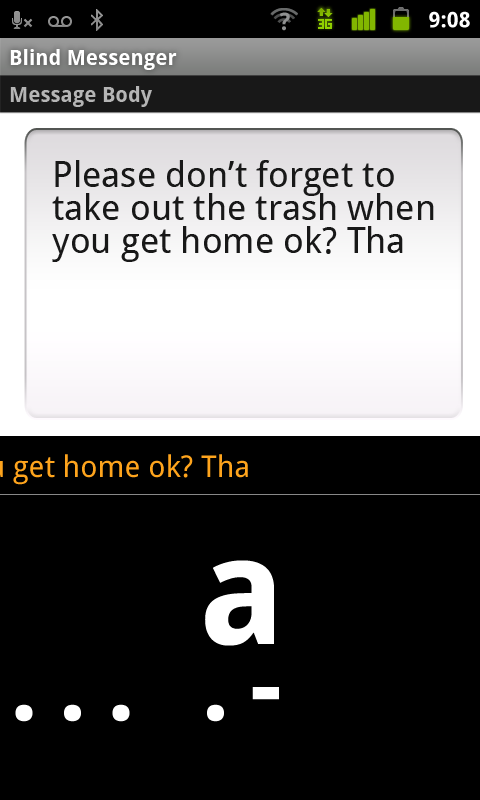
<style>
.page{position:relative;width:480px;height:800px;background:#000000}
.page>*{position:absolute;margin:0}
.t1{font:21.5px "DroidSans-Bold";letter-spacing:0.005em;color:#ffffff}
.t2{font:21px "DroidSans-Bold";color:#ffffff}
.t3{font:21px "DroidSans-Bold";color:#b5b5b5}
.t4{font:36px/32.7px "DroidSans";color:#181818}
.t5{font:150px "DroidSans-Bold";letter-spacing:0.2em;color:#ffffff}
</style>
<div class="page">
<p class="t1" style="left:429px;top:11px;width:41px;height:17px">9:08</p>
<p class="t2" style="left:10px;top:49px;width:167px;height:21px">Blind Messenger</p>
<p class="t3" style="left:10px;top:86px;width:142px;height:21px">Message Body</p>
<p class="t4" style="left:52px;top:160px;width:382px;height:102px">Please don’t forget to take out the trash when you get home ok? Tha</p>
<p class="t5" style="left:205px;top:560px;width:69px;height:86px">a</p>
</div>
